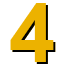
<style>
.page{position:relative;width:64px;height:64px;background:#ffffff}
.page>*{position:absolute;margin:0}
.t1{font:83.3px "Arial-BoldMT";color:#ecb200}
</style>
<div class="page">
<p class="t1" style="left:10px;top:3px;width:44px;height:59px">4</p>
</div>
